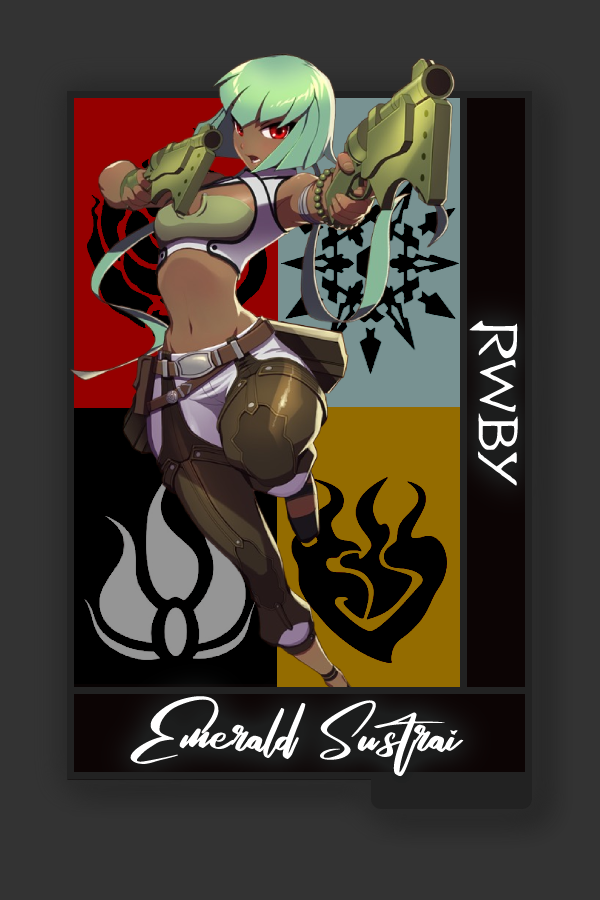
<style>
.page{position:relative;width:600px;height:900px;background:#333333}
.page>*{position:absolute;margin:0}
.t1{font:61.3px "RWBY_Style";color:#ffffff;scale:1.25 1}
.t2{font:75px "RosegaFREE";color:#ffffff}
</style>
<div class="page">
<p class="t1" style="left:469px;top:320px;width:49px;height:166px;rotate:90deg">RWBY</p>
<p class="t2" style="left:130px;top:685px;width:334px;height:92px">Emerald Sustrai</p>
</div>
